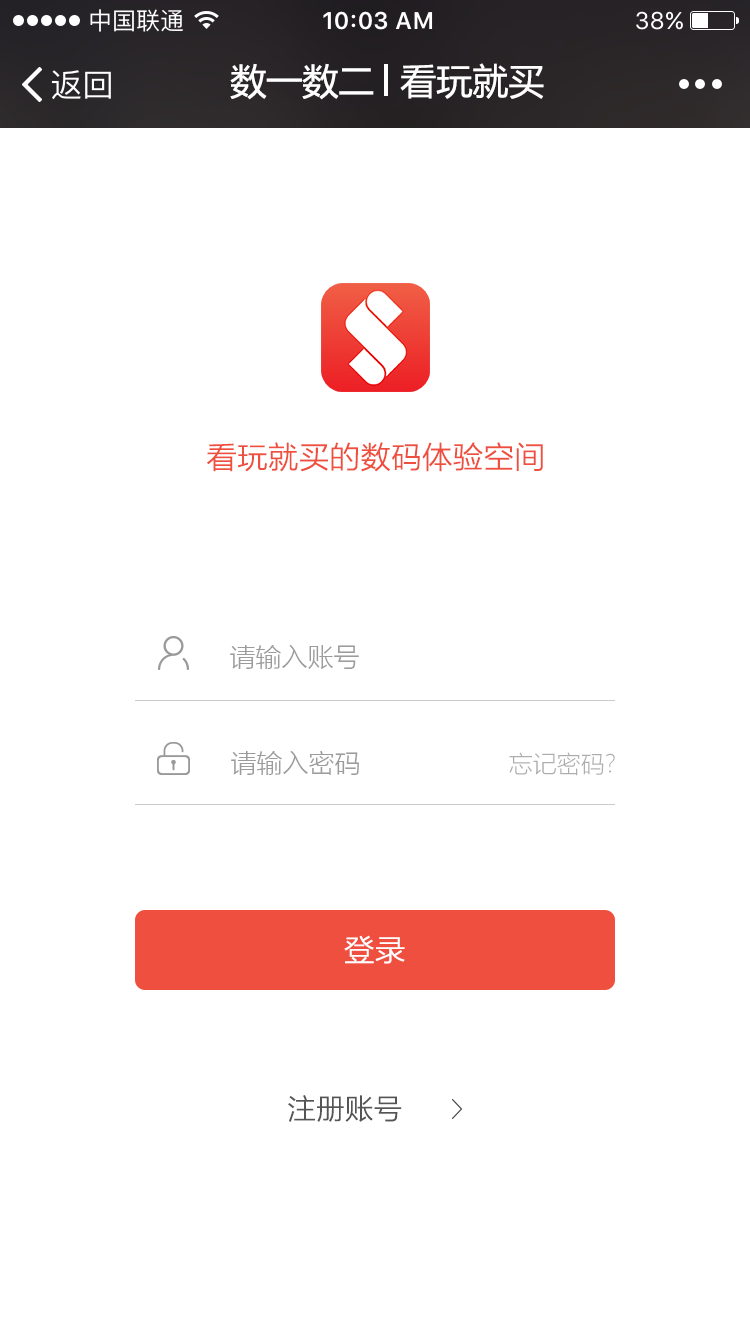
<style>
.page{position:relative;width:750px;height:1334px;background:#ffffff}
.page>*{position:absolute;margin:0}
.t1{font:36px "MicrosoftYaHei";color:#ffffff}
.t2{font:30px "MicrosoftYaHeiLight";color:#ef4f3e;font-weight:bold}
.t3{font:26px "MicrosoftYaHeiLight";color:#9c9c9c}
.t4{font:24px "MicrosoftYaHeiLight";color:#adadad}
.t5{font:30px "MicrosoftYaHeiLight";color:#ffffff;font-weight:bold}
.t6{font:28px "MicrosoftYaHeiLight";color:#555555;font-weight:bold}
</style>
<div class="page">
<p class="t1" style="left:230px;top:63px;width:144px;height:37px">数一数二</p>
<p class="t1" style="left:400px;top:63px;width:144px;height:36px">看玩就买</p>
<p class="t2" style="left:207px;top:442px;width:336px;height:30px">看玩就买的数码体验空间</p>
<p class="t3" style="left:230px;top:645px;width:129px;height:24px">请输入账号</p>
<p class="t3" style="left:231px;top:751px;width:128px;height:24px">请输入密码</p>
<p class="t4" style="left:509px;top:752px;width:106px;height:24px">忘记密码?</p>
<p class="t5" style="left:344px;top:935px;width:61px;height:29px">登录</p>
<p class="t6" style="left:288px;top:1095px;width:114px;height:27px">注册账号</p>
</div>
